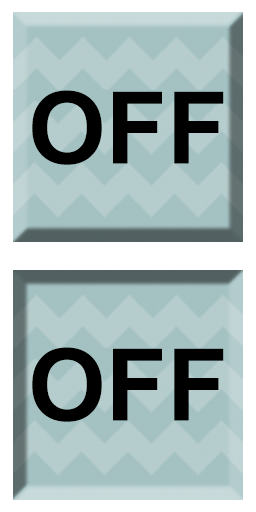
<style>
.page{position:relative;width:256px;height:512px}
.page>*{position:absolute;margin:0}
.t1{font:100px "Arial-BoldMT";color:#000000}
</style>
<div class="page">
<p class="t1" style="left:32px;top:90px;width:192px;height:75px">OFF</p>
<p class="t1" style="left:32px;top:347px;width:192px;height:75px">OFF</p>
</div>
